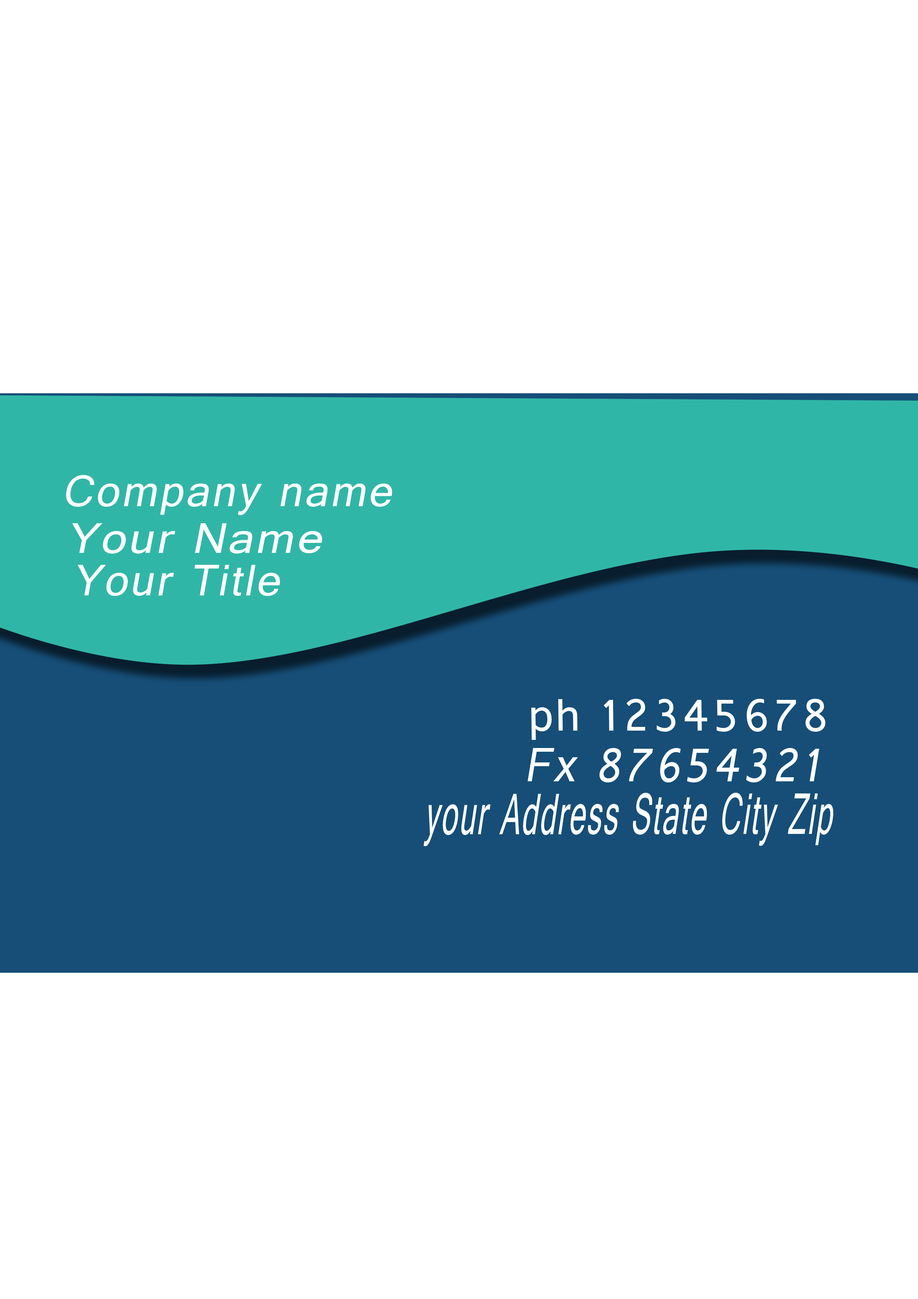
<style>
.page{position:relative;width:918px;height:1299px;background:#ffffff}
.page>*{position:absolute;margin:0}
.t1{font:46.3px "Gautami";letter-spacing:0.05em;color:#ffffff;font-style:italic}
.t2{font:44.9px "Gautami";letter-spacing:0.05em;color:#ffffff;font-style:italic;scale:1.11 1}
.t3{font:48.5px "Gautami";letter-spacing:0.05em;color:#ffffff;font-style:italic}
.t4{font:50.5px "Gautami";letter-spacing:0.05em;color:#ffffff;font-style:italic;scale:0.94 1}
.t5{font:61.2px "Gautami";letter-spacing:0.05em;color:#ffffff;font-style:italic;scale:0.52 1}
</style>
<div class="page">
<p class="t1" style="left:66px;top:475px;width:326px;height:40px">Company name</p>
<p class="t2" style="left:72px;top:523px;width:250px;height:30px">Your Name</p>
<p class="t1" style="left:78px;top:565px;width:202px;height:31px">Your Title</p>
<p class="t3" style="left:531px;top:699px;width:295px;height:41px">ph 12345678</p>
<p class="t4" style="left:528px;top:748px;width:292px;height:34px">Fx 87654321</p>
<p class="t5" style="left:424px;top:792px;width:409px;height:54px">your Address State City Zip</p>
</div>
